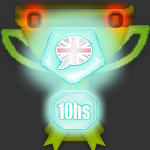
<style>
.page{position:relative;width:150px;height:150px;background:#333333}
.page>*{position:absolute;margin:0}
.t1{font:20.8px "Impact";color:#fefffe;scale:0.81 1}
</style>
<div class="page">
<p class="t1" style="left:58px;top:102px;width:32px;height:18px">10hs</p>
</div>
